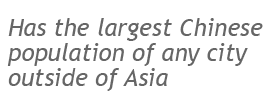
<style>
.page{position:relative;width:280px;height:100px;background:#ffffff}
.page>*{position:absolute;margin:0}
.t1{font:24px/25px "TrebuchetMS-Italic";color:#666666}
</style>
<div class="page">
<p class="t1" style="left:7px;top:18px;width:256px;height:73px">Has the largest Chinese <br>population of any city <br>outside of Asia</p>
</div>
